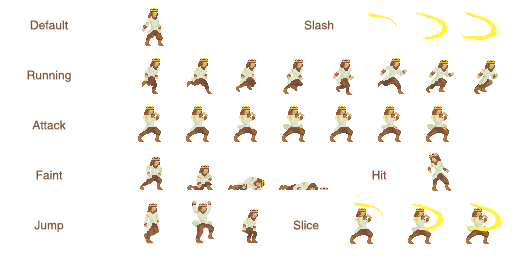
<style>
.page{position:relative;width:512px;height:256px;background:#ffffff}
.page>*{position:absolute;margin:0}
.t1{font:12px "Helvetica";color:#82553a}
</style>
<div class="page">
<p class="t1" style="left:30px;top:20px;width:38px;height:10px">Default</p>
<p class="t1" style="left:304px;top:20px;width:30px;height:10px">Slash</p>
<p class="t1" style="left:27px;top:70px;width:44px;height:12px">Running</p>
<p class="t1" style="left:32px;top:120px;width:34px;height:10px">Attack</p>
<p class="t1" style="left:36px;top:170px;width:27px;height:10px">Faint</p>
<p class="t1" style="left:372px;top:170px;width:15px;height:10px">Hit</p>
<p class="t1" style="left:34px;top:220px;width:30px;height:12px">Jump</p>
<p class="t1" style="left:293px;top:220px;width:26px;height:10px">Slice</p>
</div>
